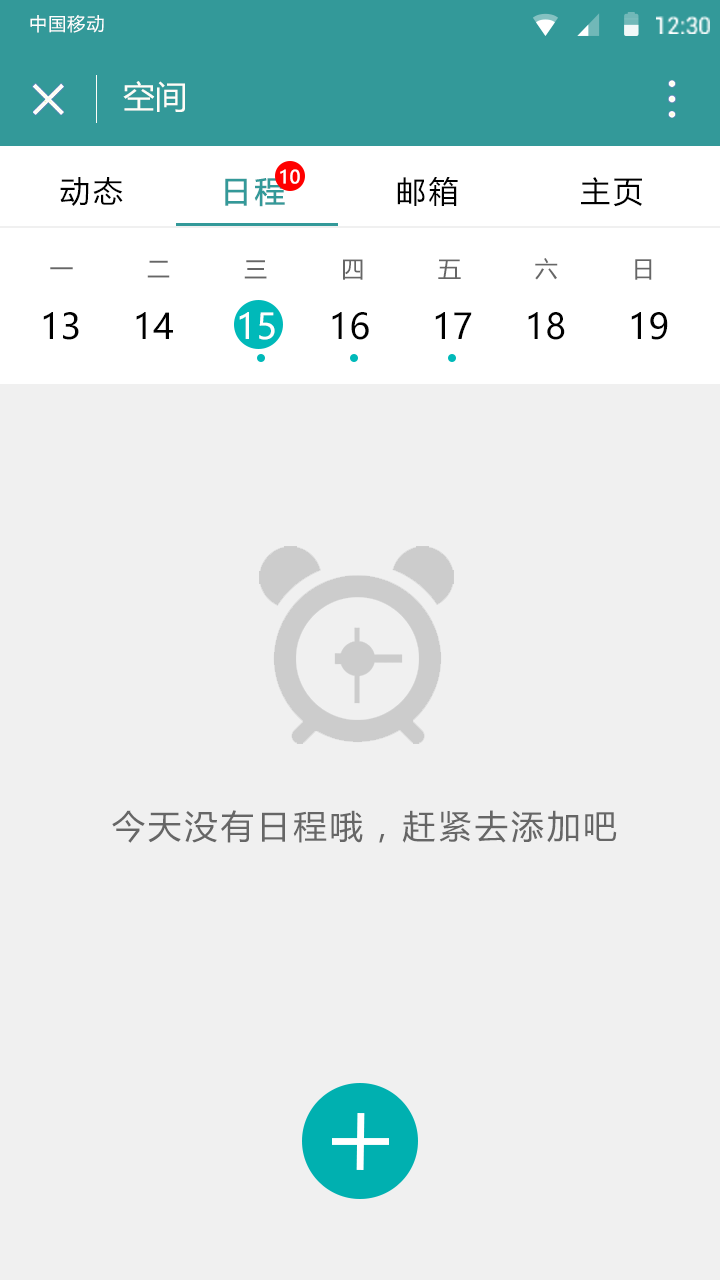
<style>
.page{position:relative;width:720px;height:1280px;background:#f0f0f0}
.page>*{position:absolute;margin:0}
.t1{font:17.9px "MicrosoftYaHei";letter-spacing:0.065em;color:#ffffff}
.t2{font:32px "MicrosoftYaHei";color:#fefdf8}
.t3{font:18px "MicrosoftYaHei";color:#ffffff;font-weight:bold}
.t4{font:30px "MicrosoftYaHei";letter-spacing:0.1em;color:#000000}
.t5{font:30px "MicrosoftYaHei";letter-spacing:0.1em;color:#339999;font-weight:bold}
.t6{font:23px "MicrosoftYaHei";letter-spacing:1.46em;color:#666666}
.t7{font:35px "MicrosoftYaHei";color:#000000}
.t8{font:35px "MicrosoftYaHei";color:#ffffff}
.t9{font:33px "MicrosoftYaHei";letter-spacing:0.1em;color:#666666}
</style>
<div class="page">
<p class="t1" style="left:30px;top:15px;width:74px;height:18px">中国移动</p>
<p class="t2" style="left:123px;top:81px;width:62px;height:31px">空间</p>
<p class="t3" style="left:280px;top:169px;width:20px;height:15px">10</p>
<p class="t4" style="left:60px;top:177px;width:582px;height:30px">动态        <span class="t5">日程         </span>邮箱          主页</p>
<p class="t6" style="left:50px;top:258px;width:602px;height:22px">一 二 三 四 五 六 日</p>
<p class="t7" style="left:43px;top:312px;width:625px;height:28px">13     14      <span class="t8">15     </span>16      17     18      19</p>
<p class="t9" style="left:112px;top:810px;width:505px;height:33px">今天没有日程哦，赶紧去添加吧</p>
</div>
